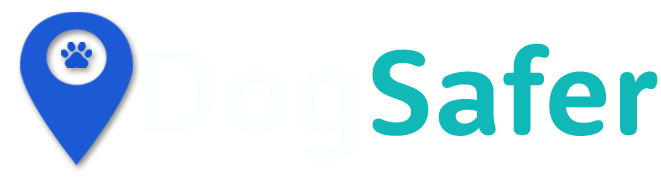
<style>
.page{position:relative;width:661px;height:177px;background:#ffffff}
.page>*{position:absolute;margin:0}
.t1{font:124.5px "MFRooneySans-Bold";color:#fafffd}
.t2{font:124.5px "MFRooneySans-Bold";color:#11b8b8}
</style>
<div class="page">
<p class="t1" style="left:143px;top:48px;width:215px;height:115px">Dog</p>
<p class="t2" style="left:372px;top:43px;width:286px;height:93px">Safer</p>
</div>
